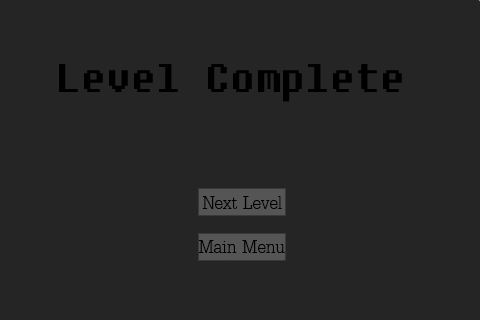
<style>
.page{position:relative;width:480px;height:320px;background:#252525}
.page>*{position:absolute;margin:0}
.t1{font:40px "Fixedsys";color:#000000}
.t2{font:26.7px "DilleniaUPC";color:#000000}
</style>
<div class="page">
<p class="t1" style="left:59px;top:64px;width:343px;height:38px">Level Complete</p>
<p class="t2" style="left:202px;top:196px;width:80px;height:13px">Next Level</p>
<p class="t2" style="left:198px;top:240px;width:87px;height:13px">Main Menu</p>
</div>
